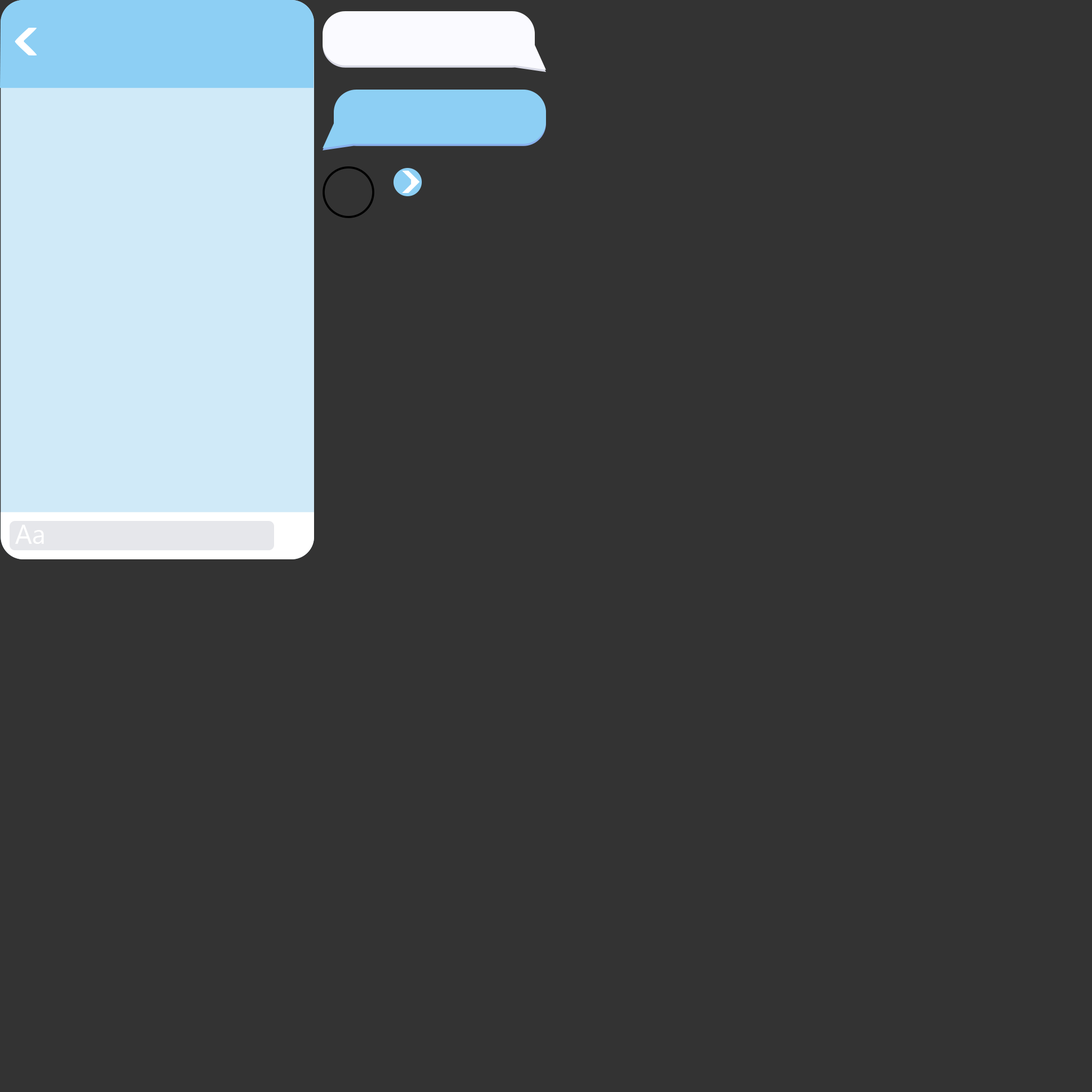
<style>
.page{position:relative;width:1092px;height:1092px;background:#333333}
.page>*{position:absolute;margin:0}
.t1{font:26.7px "MyanmarText";color:#ffffff}
</style>
<div class="page">
<p class="t1" style="left:15px;top:525px;width:29px;height:19px">Aa</p>
</div>
